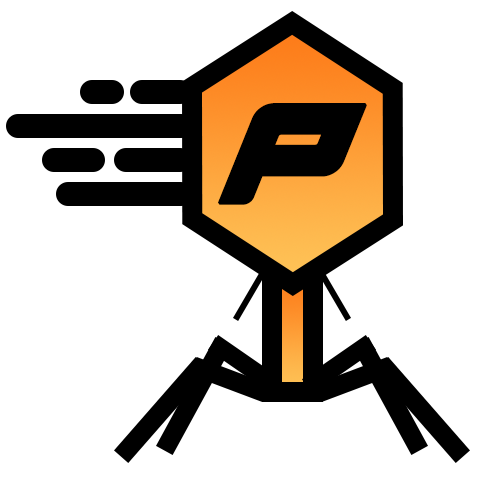
<style>
.page{position:relative;width:480px;height:480px;background:#ffffff}
.page>*{position:absolute;margin:0}
.t1{font:112.5px "SportypoReguler";color:#000000;font-weight:bold}
</style>
<div class="page">
<p class="t1" style="left:218px;top:103px;width:149px;height:102px">P</p>
</div>
